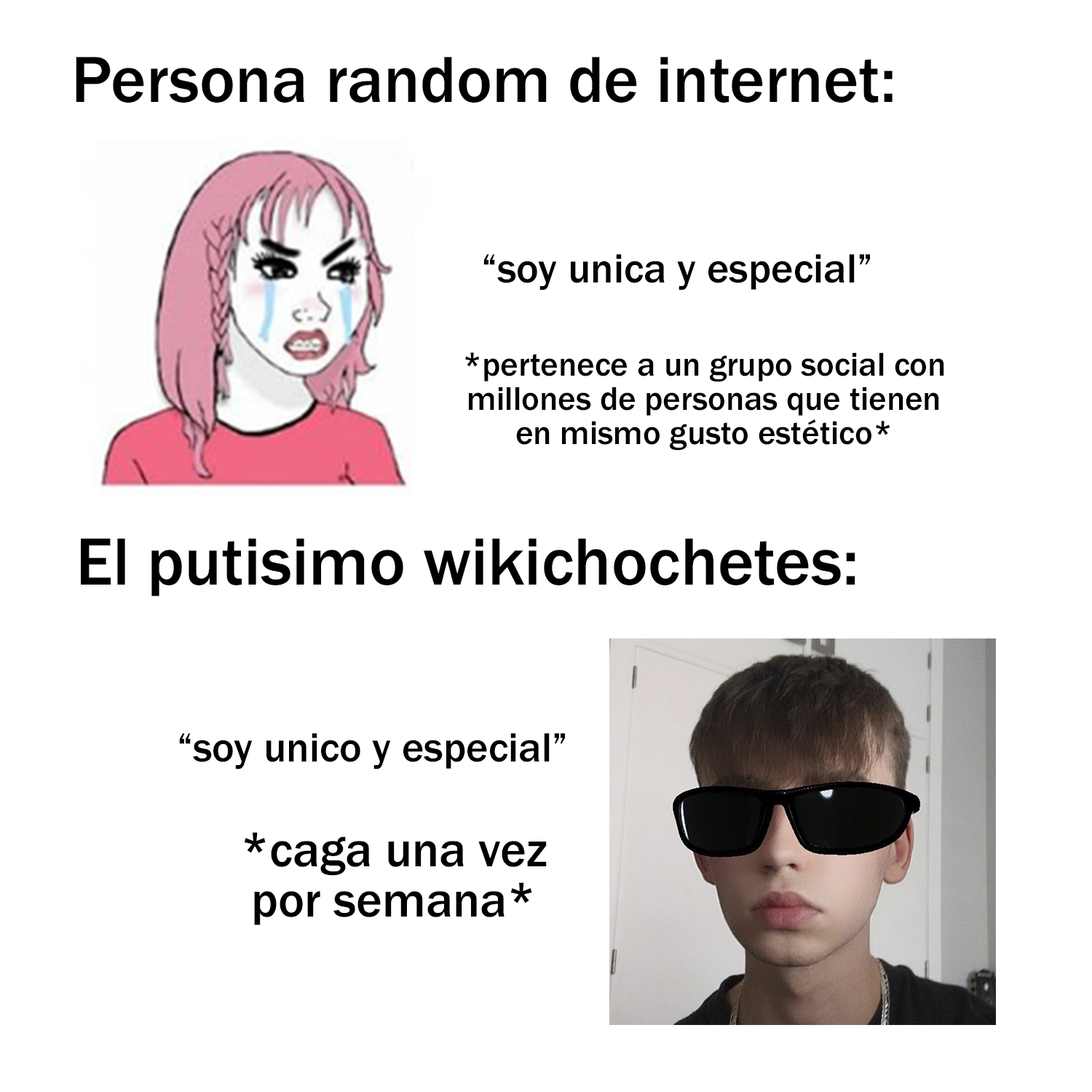
<style>
.page{position:relative;width:1092px;height:1092px;background:#ffffff}
.page>*{position:absolute;margin:0}
.t1{font:67.3px "FranklinGothic-Medium";color:#000000}
.t2{font:42.5px "FranklinGothic-Medium";color:#000000}
.t3{font:34px "FranklinGothic-Medium";color:#000000}
.t4{font:69.1px "FranklinGothic-Medium";color:#000000}
.t5{font:50px "FranklinGothic-Medium";color:#000000}
</style>
<div class="page">
<p class="t1" style="left:76px;top:57px;width:817px;height:46px">Persona random de internet:</p>
<p class="t2" style="left:483px;top:254px;width:387px;height:36px">“soy unica y especial”</p>
<p class="t3" style="left:465px;top:352px;width:479px;height:99px;text-align:center">*pertenece a un grupo social con<br>millones de personas que tienen<br>en mismo gusto estético*</p>
<p class="t4" style="left:81px;top:538px;width:774px;height:58px">El putisimo wikichochetes:</p>
<p class="t2" style="left:179px;top:733px;width:386px;height:36px">“soy unico y especial”</p>
<p class="t5" style="left:244px;top:832px;width:303px;height:93px;text-align:center">*caga una vez<br>por semana*</p>
</div>
